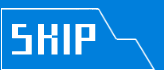
<style>
.page{position:relative;width:164px;height:70px;background:#007fdc}
.page>*{position:absolute;margin:0}
.t1{font:40px "Starcadia";color:#ffffff;font-weight:bold}
</style>
<div class="page">
<p class="t1" style="left:12px;top:24px;width:84px;height:31px">SKIP</p>
</div>
